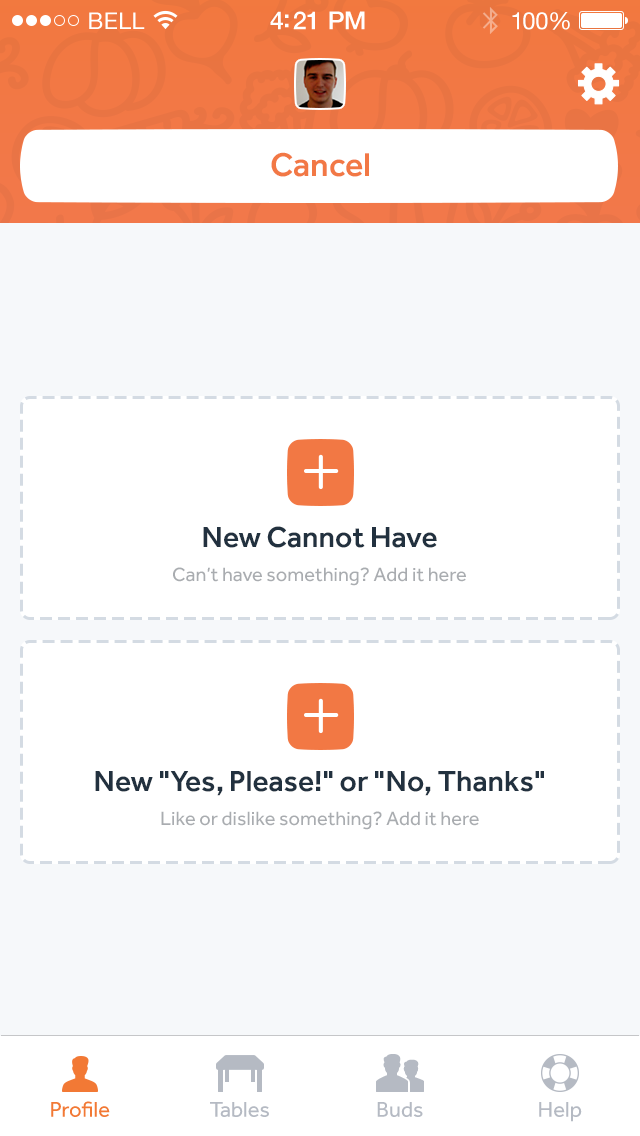
<style>
.page{position:relative;width:640px;height:1136px;background:#ffffff}
.page>*{position:absolute;margin:0}
.t1{font:23px "HelveticaNeue";letter-spacing:0.02em;color:#ffffff}
.t2{font:25px "HelveticaNeue-Medium";letter-spacing:-0.02em;color:#ffffff}
.t3{font:24px "HelveticaNeue";letter-spacing:-0.02em;color:#ffffff}
.t4{font:34px "Effra-Medium";color:#f27845}
.t5{font:30px "Effra-Medium";color:#22313f}
.t6{font:20px "Effra-Regular";color:#a9acb0}
.t7{font:22px "Effra-Regular";color:#f27935}
.t8{font:22px "Effra-Regular";color:#b5bac3}
</style>
<div class="page">
<p class="t1" style="left:89px;top:12px;width:56px;height:17px">BELL</p>
<p class="t2" style="left:270px;top:11px;width:95px;height:19px">4:21 PM</p>
<p class="t3" style="left:512px;top:12px;width:58px;height:18px">100%</p>
<p class="t4" style="left:271px;top:152px;width:98px;height:25px">Cancel</p>
<p class="t5" style="left:203px;top:526px;width:234px;height:22px">New Cannot Have</p>
<p class="t6" style="left:173px;top:567px;width:293px;height:19px">Can’t have something? Add it here</p>
<p class="t5" style="left:95px;top:771px;width:449px;height:25px">New "Yes, Please!" or "No, Thanks"</p>
<p class="t6" style="left:161px;top:811px;width:318px;height:19px">Like or dislike something? Add it here</p>
<p class="t7" style="left:51px;top:1101px;width:59px;height:16px">Profile</p>
<p class="t8" style="left:210px;top:1102px;width:59px;height:15px">Tables</p>
<p class="t8" style="left:377px;top:1102px;width:46px;height:15px">Buds</p>
<p class="t8" style="left:539px;top:1102px;width:43px;height:20px">Help</p>
</div>
